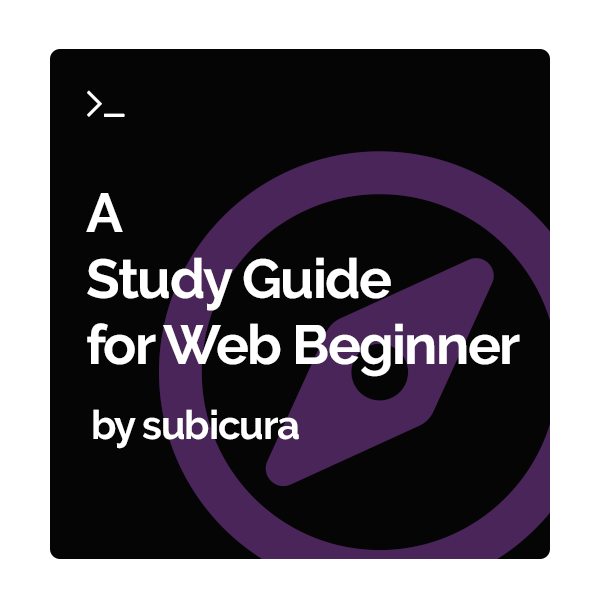
<style>
.page{position:relative;width:600px;height:600px;background:#050505}
.page>*{position:absolute;margin:0}
.t1{font:55px "Raleway-Bold";letter-spacing:-0.03em;color:#ffffff}
.t2{font:40px "Raleway-Bold";letter-spacing:-0.03em;color:#ffffff}
</style>
<div class="page">
<p class="t1" style="left:86px;top:193px;width:434px;height:184px">A<br>Study Guide<br>for Web Beginner</p>
<p class="t2" style="left:93px;top:409px;width:206px;height:40px">by subicura</p>
</div>
